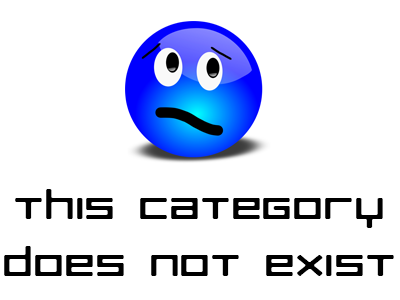
<style>
.page{position:relative;width:400px;height:300px;background:#ffffff}
.page>*{position:absolute;margin:0}
.t1{font:38.4px "RazerRegular";color:#000000;scale:1.25 1}
</style>
<div class="page">
<p class="t1" style="left:4px;top:189px;width:390px;height:87px;text-align:center">This category<br>does not exist</p>
</div>
